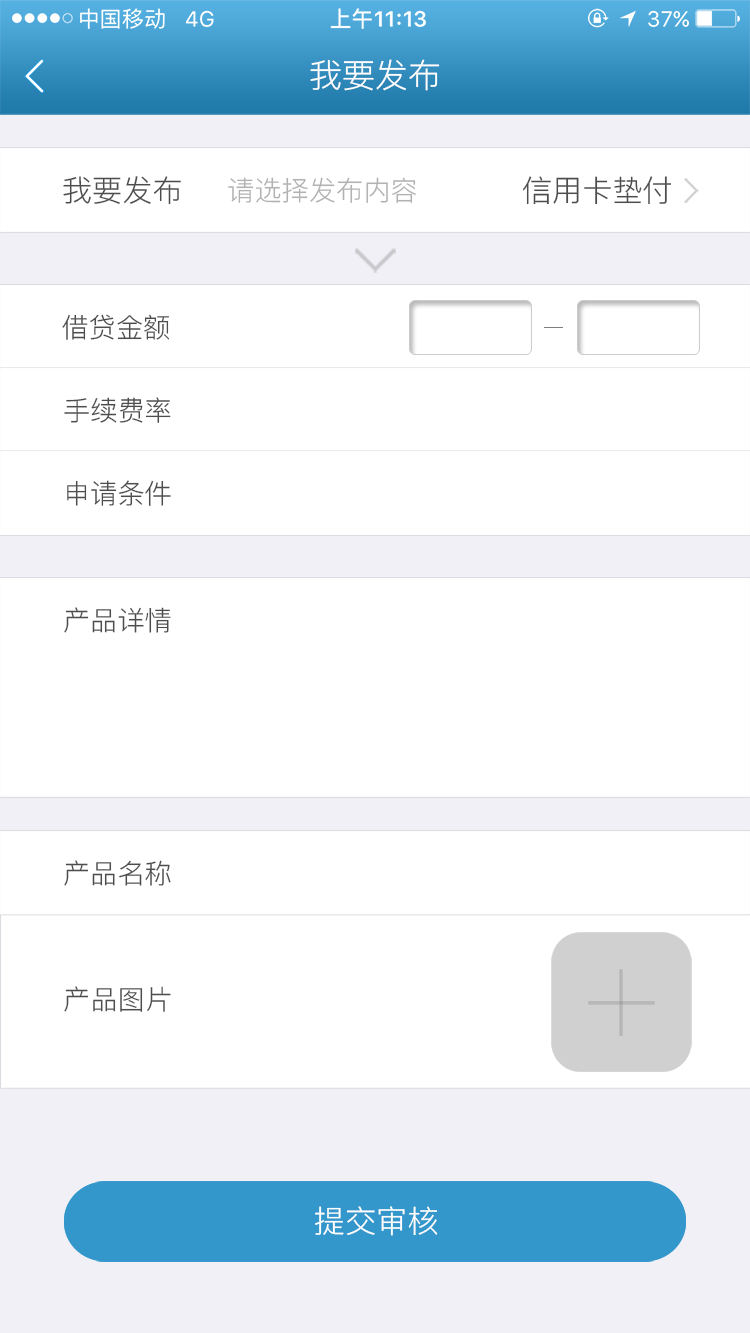
<style>
.page{position:relative;width:750px;height:1333px;background:#ffffff}
.page>*{position:absolute;margin:0}
.t1{font:33.3px "PingFang-SC-Regular";color:#ffffff}
.t2{font:30px "PingFang-SC-Regular";color:#4d4d4d}
.t3{font:27.2px "PingFang-SC-Regular";color:#b2b2b2}
.t4{font:27.2px "PingFang-SC-Regular";color:#4d4d4d}
.t5{font:31px "PingFang-SC-Regular";color:#ffffff}
</style>
<div class="page">
<p class="t1" style="left:310px;top:59px;width:130px;height:32px">我要发布</p>
<p class="t2" style="left:63px;top:176px;width:118px;height:29px">我要发布</p>
<p class="t3" style="left:228px;top:177px;width:189px;height:26px">请选择发布内容</p>
<p class="t2" style="left:523px;top:176px;width:148px;height:29px">信用卡垫付</p>
<p class="t4" style="left:62px;top:314px;width:108px;height:26px">借贷金额</p>
<p class="t4" style="left:64px;top:397px;width:107px;height:26px">手续费率</p>
<p class="t4" style="left:67px;top:480px;width:104px;height:26px">申请条件</p>
<p class="t4" style="left:64px;top:607px;width:107px;height:26px">产品详情</p>
<p class="t4" style="left:64px;top:860px;width:107px;height:26px">产品名称</p>
<p class="t4" style="left:64px;top:986px;width:107px;height:26px">产品图片</p>
<p class="t5" style="left:315px;top:1206px;width:123px;height:30px">提交审核</p>
</div>
